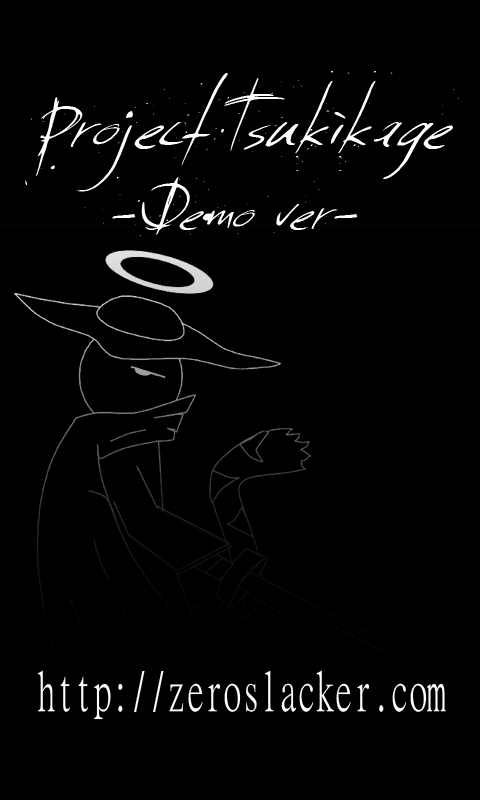
<style>
.page{position:relative;width:480px;height:800px;background:#000000}
.page>*{position:absolute;margin:0}
.t1{font:37.6px "SundayMonday";color:#ffffff;scale:0.94 1}
.t2{font:31.4px "SundayMonday";color:#ffffff;scale:0.94 1}
.t3{font:54.8px "MingLiU";color:#ffffff;scale:0.68 1}
</style>
<div class="page">
<p class="t1" style="left:25px;top:71px;width:434px;height:137px;text-align:center">Project Tsukikage</p>
<p class="t2" style="left:102px;top:177px;width:256px;height:59px;text-align:center">-Demo ver-</p>
<p class="t3" style="left:38px;top:670px;width:408px;height:50px">http://zeroslacker.com</p>
</div>
